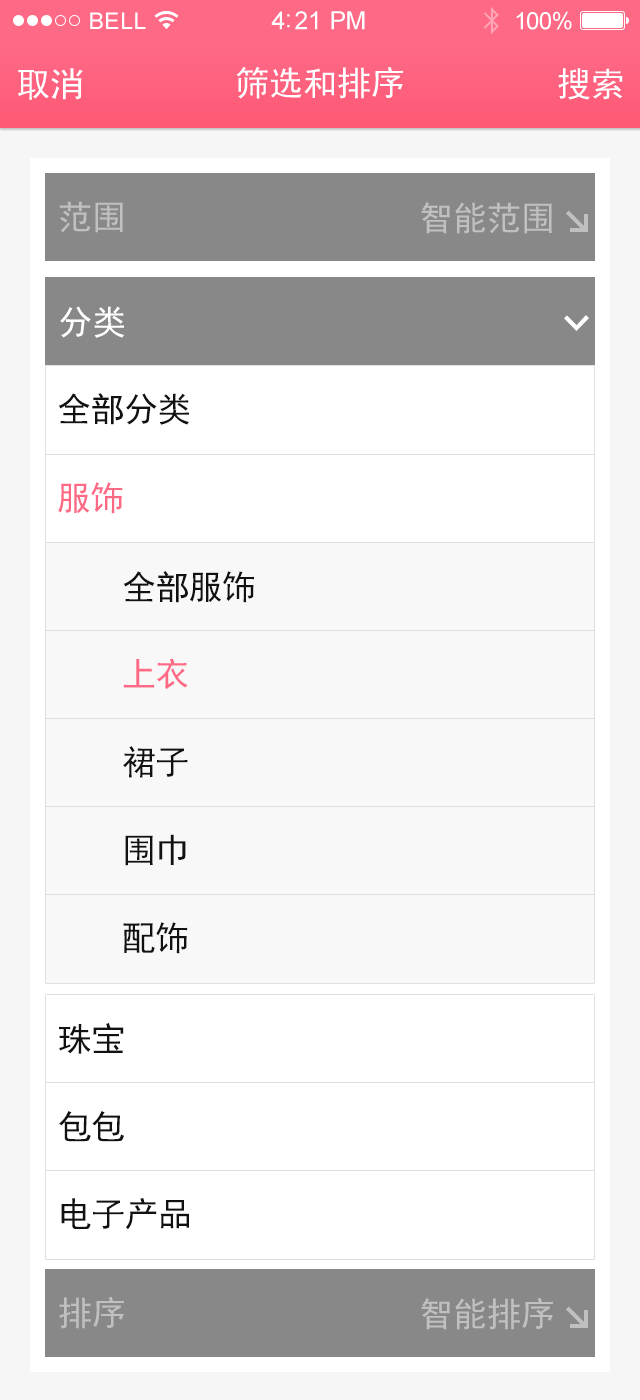
<style>
.page{position:relative;width:640px;height:1400px;background:#ffffff}
.page>*{position:absolute;margin:0}
.t1{font:34px "SimHei";color:#c0c0c0}
.t2{font:34px "SimHei";color:#ffffff}
.t3{font:34px "SimHei";letter-spacing:-0.02em;color:#111111}
.t4{font:34px "SimHei";letter-spacing:-0.02em;color:#fe6986}
</style>
<div class="page">
<p class="t1" style="left:59px;top:201px;width:64px;height:32px">范围</p>
<p class="t1" style="left:421px;top:202px;width:131px;height:32px">智能范围</p>
<p class="t2" style="left:60px;top:306px;width:64px;height:32px">分类</p>
<p class="t3" style="left:58px;top:393px;width:131px;height:32px">全部分类</p>
<p class="t4" style="left:58px;top:482px;width:65px;height:32px">服饰</p>
<p class="t3" style="left:123px;top:571px;width:131px;height:32px">全部服饰</p>
<p class="t4" style="left:123px;top:658px;width:65px;height:31px">上衣</p>
<p class="t3" style="left:123px;top:746px;width:65px;height:32px">裙子</p>
<p class="t3" style="left:125px;top:834px;width:61px;height:32px">围巾</p>
<p class="t3" style="left:123px;top:922px;width:65px;height:32px">配饰</p>
<p class="t3" style="left:59px;top:1023px;width:65px;height:31px">珠宝</p>
<p class="t3" style="left:59px;top:1110px;width:65px;height:32px">包包</p>
<p class="t3" style="left:61px;top:1198px;width:128px;height:32px">电子产品</p>
<p class="t1" style="left:59px;top:1297px;width:65px;height:32px">排序</p>
<p class="t1" style="left:421px;top:1298px;width:132px;height:32px">智能排序</p>
</div>
